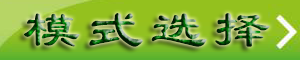
<style>
.page{position:relative;width:300px;height:60px}
.page>*{position:absolute;margin:0}
.t1{font:52.8px "LiSu";letter-spacing:0.1em;scale:1.09 1}
</style>
<div class="page">
<p class="t1" style="left:24px;top:13px;width:246px;height:34px">模式选择</p>
</div>
